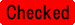
<style>
.page{position:relative;width:75px;height:25px;background:#ff0000}
.page>*{position:absolute;margin:0}
.t1{font:18px "HGPGothicE";color:#000000}
</style>
<div class="page">
<p class="t1" style="left:6px;top:4px;width:63px;height:16px">Checked</p>
</div>
